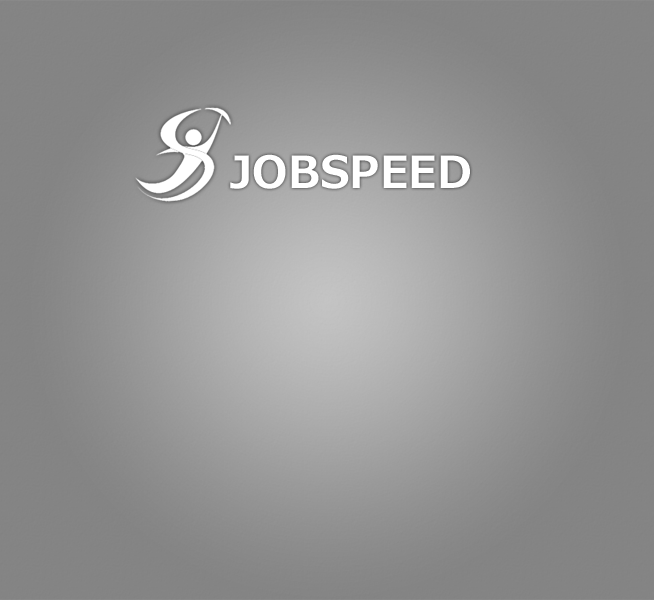
<style>
.page{position:relative;width:654px;height:600px;background:#848484}
.page>*{position:absolute;margin:0}
.t1{font:44px "MeiryoUI-Bold";color:#ffffff}
</style>
<div class="page">
<p class="t1" style="left:230px;top:154px;width:240px;height:35px">JOBSPEED</p>
</div>
